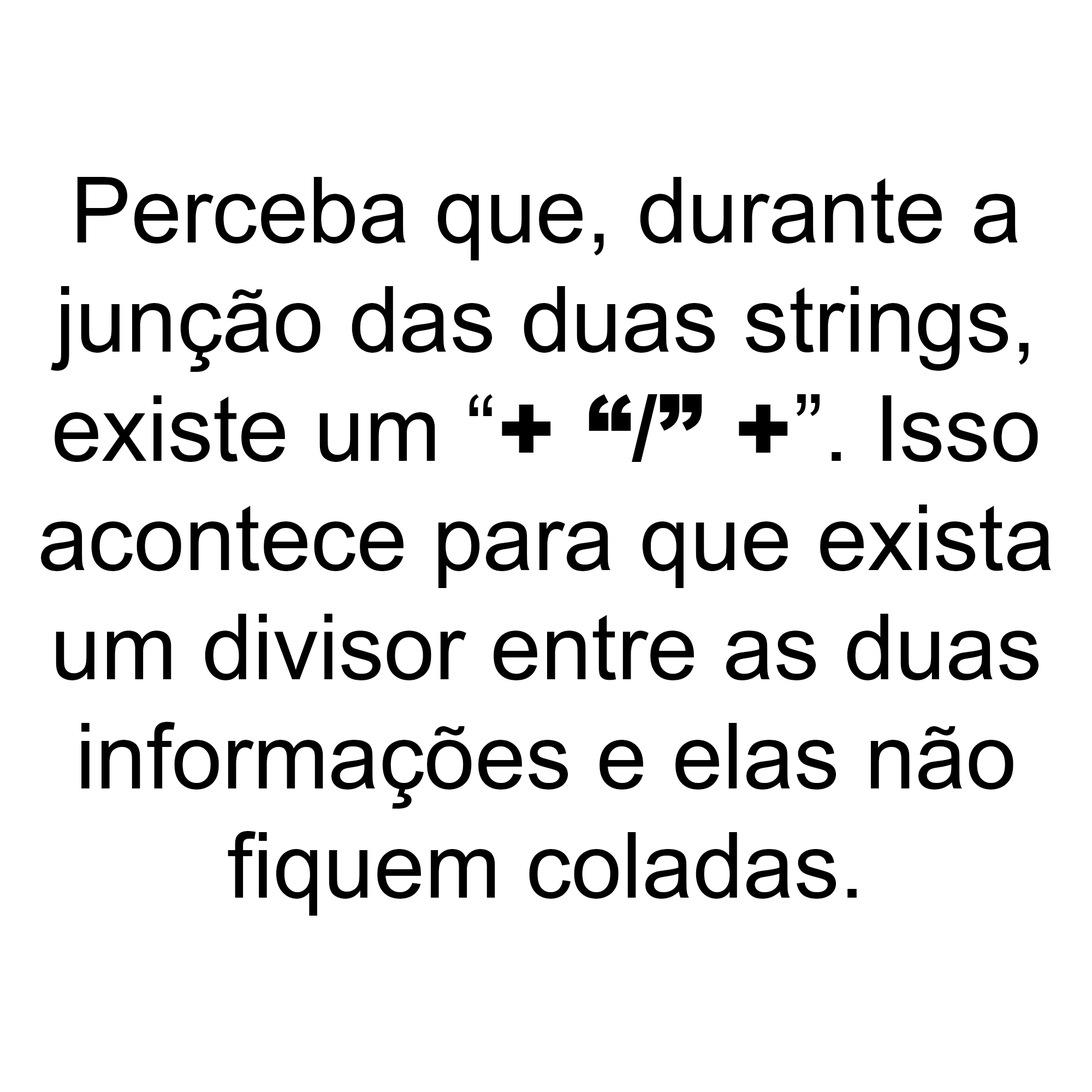
<style>
.page{position:relative;width:1092px;height:1092px;background:#ffffff}
.page>*{position:absolute;margin:0}
.t1{font:91px "ArialMT";color:#000000}
.t2{font:91px "Arial-Black";color:#000000}
</style>
<div class="page">
<p class="t1" style="left:41px;top:177px;width:1010px;height:739px;text-align:center">Perceba que, durante a<br>junção das duas strings,<br>existe um “<span class="t2">+ “/” +</span>”. Isso<br>acontece para que exista<br>um divisor entre as duas<br>informações e elas não<br>fiquem coladas.</p>
</div>
